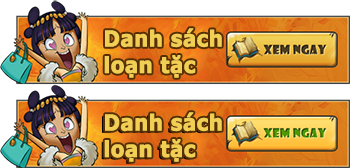
<style>
.page{position:relative;width:350px;height:168px;background:#ffffff}
.page>*{position:absolute;margin:0}
.t1{font:21.8px/26.4px "Verdana-Bold";color:#f1ce54;font-weight:bold;scale:0.91 1}
</style>
<div class="page">
<p class="t1" style="left:104px;top:28px;width:118px;height:50px">Danh sách<br>loạn tặc</p>
<p class="t1" style="left:104px;top:112px;width:118px;height:50px">Danh sách<br>loạn tặc</p>
</div>
